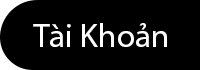
<style>
.page{position:relative;width:200px;height:70px;background:#000000}
.page>*{position:absolute;margin:0}
.t1{font:32.9px "MyriadPro-Regular";color:#fefefe}
</style>
<div class="page">
<p class="t1" style="left:33px;top:23px;width:134px;height:24px">Tài Khoản</p>
</div>
